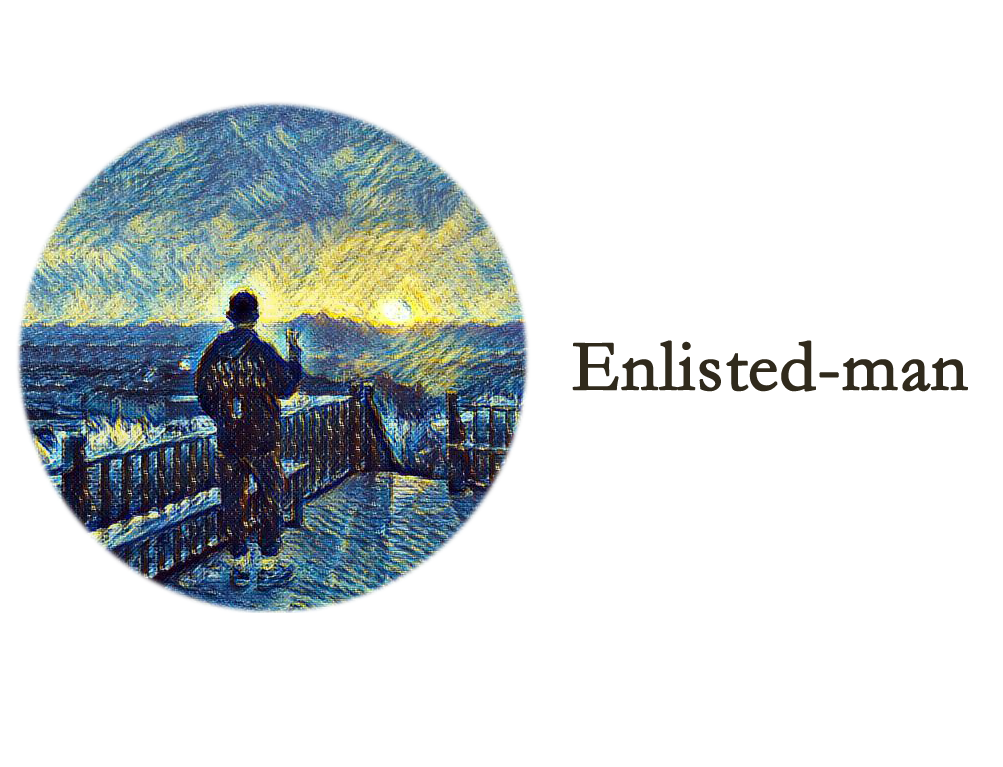
<style>
.page{position:relative;width:1003px;height:767px;background:#ffffff}
.page>*{position:absolute;margin:0}
.t1{font:72px "STKaiti";color:#302a1c;font-weight:bold}
</style>
<div class="page">
<p class="t1" style="left:572px;top:340px;width:396px;height:52px">Enlisted-man</p>
</div>
